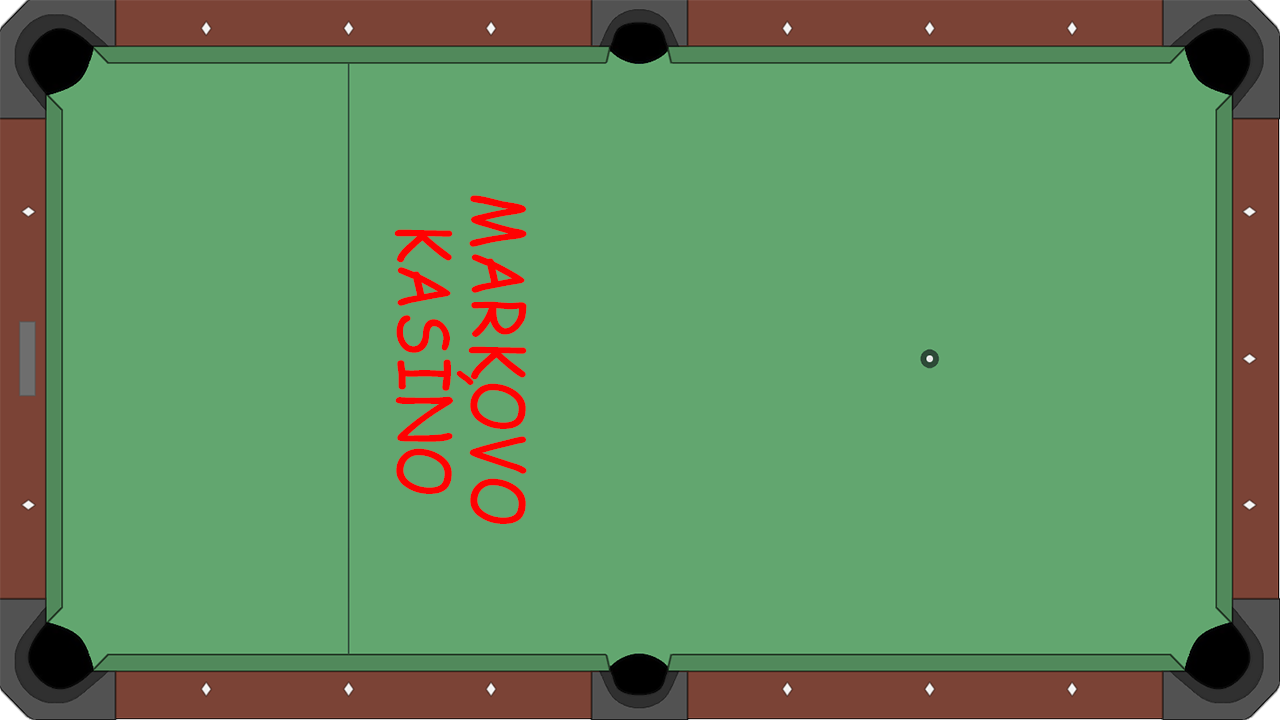
<style>
.page{position:relative;width:1280px;height:720px;background:#62a66f}
.page>*{position:absolute;margin:0}
.t1{font:72px/73.9px "ComicSansMS";letter-spacing:0.01em;color:#ff0202;scale:0.9 1}
</style>
<div class="page">
<p class="t1" style="left:394px;top:195px;width:133px;height:329px;text-align:center;rotate:90deg">MARKOVO<br>KASÍNO</p>
</div>
